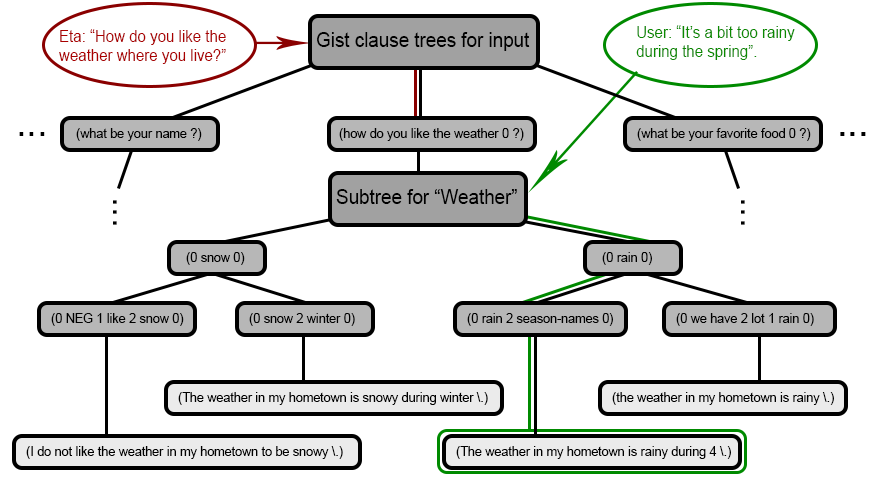
<style>
.page{position:relative;width:882px;height:483px;background:#ffffff}
.page>*{position:absolute;margin:0}
.t1{font:16px "ArialMT";color:#aa0000;scale:0.94 1}
.t2{font:12px "ArialMT";color:#0a8a00;scale:0.94 1}
.t3{font:20px "ArialMT";color:#000000;scale:0.94 1}
.t4{font:40px "ArialMT";color:#000000;scale:0.94 1}
.t5{font:13.3px "ArialMT";color:#000000;scale:0.94 1}
</style>
<div class="page">
<p class="t1" style="left:59px;top:29px;width:167px;height:35px">Eta: “How do you like the<br>weather where you live?”</p>
<p class="t2" style="left:636px;top:25px;width:159px;height:35px">User: “It’s a bit too rainy during the spring”.</p>
<p class="t3" style="left:317px;top:32px;width:213px;height:19px">Gist clause trees for input</p>
<p class="t4" style="left:19px;top:132px;width:26px;height:4px">...</p>
<p class="t5" style="left:76px;top:128px;width:126px;height:13px">(what be your name ?)</p>
<p class="t5" style="left:339px;top:128px;width:185px;height:13px">(how do you like the weather 0 ?)</p>
<p class="t5" style="left:637px;top:128px;width:174px;height:13px">(what be your favorite food 0 ?)</p>
<p class="t4" style="left:840px;top:132px;width:26px;height:4px">...</p>
<p class="t4" style="left:840px;top:132px;width:26px;height:4px">...</p>
<p class="t3" style="left:336px;top:189px;width:181px;height:15px">Subtree for “Weather”</p>
<p class="t4" style="left:113px;top:200px;width:4px;height:25px;rotate:90deg">...</p>
<p class="t4" style="left:741px;top:200px;width:4px;height:25px;rotate:90deg">...</p>
<p class="t5" style="left:186px;top:252px;width:59px;height:13px">(0 snow 0)</p>
<p class="t5" style="left:602px;top:252px;width:50px;height:13px">(0 rain 0)</p>
<p class="t5" style="left:51px;top:313px;width:133px;height:13px">(0 NEG 1 like 2 snow 0)</p>
<p class="t5" style="left:249px;top:313px;width:106px;height:13px">(0 snow 2 winter 0)</p>
<p class="t5" style="left:467px;top:313px;width:146px;height:13px">(0 rain 2 season-names 0)</p>
<p class="t5" style="left:676px;top:313px;width:138px;height:13px">(0 we have 2 lot 1 rain 0)</p>
<p class="t5" style="left:178px;top:392px;width:310px;height:13px">(The weather in my hometown is snowy during winter \.)</p>
<p class="t5" style="left:612px;top:392px;width:222px;height:13px">(the weather in my hometown is rainy \.)</p>
<p class="t5" style="left:26px;top:446px;width:317px;height:13px">(I do not like the weather in my hometown to be snowy \.)</p>
<p class="t5" style="left:456px;top:446px;width:275px;height:13px">(The weather in my hometown is rainy during 4 \.)</p>
</div>
